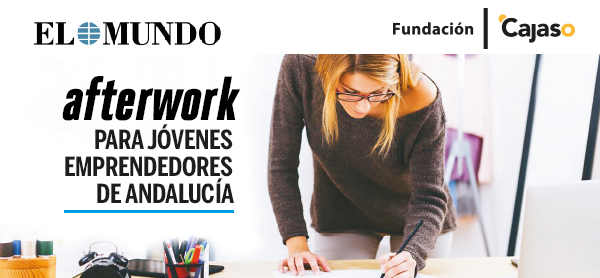
<style>
.page{position:relative;width:600px;height:278px;background:#ffffff}
.page>*{position:absolute;margin:0}
.t1{font:61.2px "HeroicCondensed-Black";letter-spacing:-0.01em;color:#000000;font-style:italic;scale:1.05 1}
.t2{font:26.2px/27.3px "BentonSansComp-Bold";letter-spacing:-0.01em;color:#1d1d1b;scale:1.05 1}
</style>
<div class="page">
<p class="t1" style="left:62px;top:76px;width:179px;height:45px">afterwork</p>
<p class="t2" style="left:65px;top:124px;width:169px;height:80px;text-align:right">PARA JÓVENES<br>EMPRENDEDORES  <br>DE ANDALUCÍA</p>
</div>
